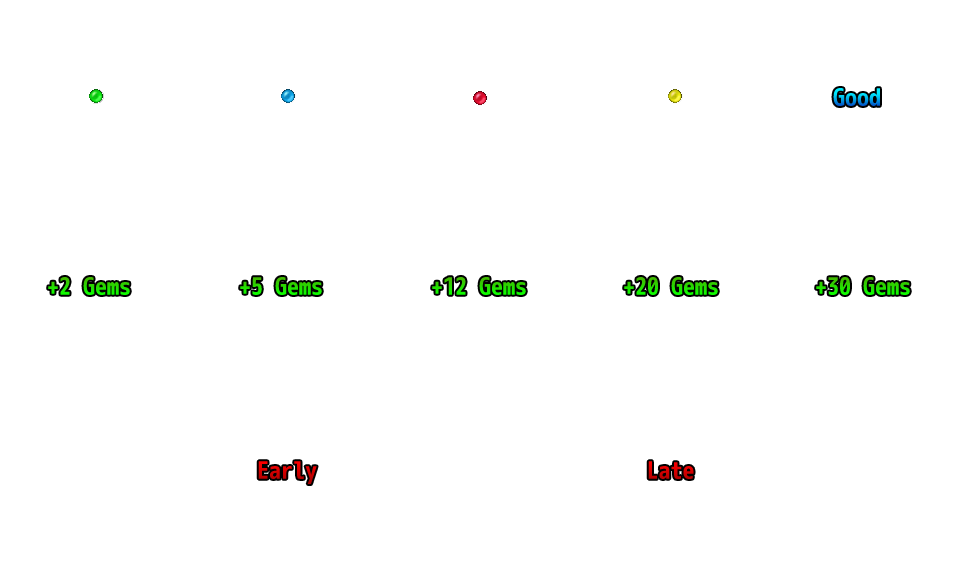
<style>
.page{position:relative;width:960px;height:576px;background:#ffffff}
.page>*{position:absolute;margin:0}
.t1{font:24px "mplus-1m-bold"}
</style>
<div class="page">
<p class="t1" style="left:833px;top:88px;width:47px;height:18px">Good</p>
<p class="t1" style="left:48px;top:277px;width:862px;height:18px">+2 Gems         +5 Gems         +12 Gems        +20 Gems        +30 Gems</p>
<p class="t1" style="left:258px;top:461px;width:436px;height:23px">Early                            Late</p>
</div>
